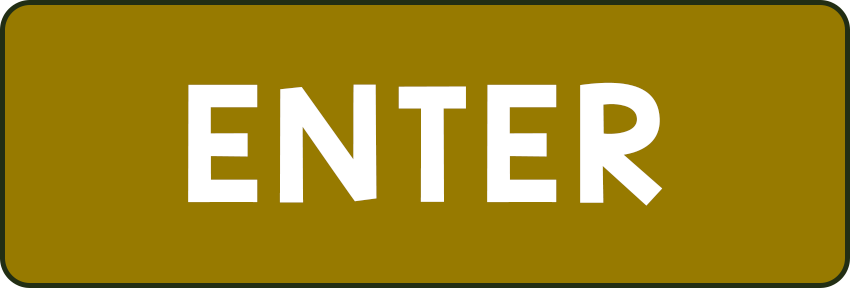
<style>
.page{position:relative;width:850px;height:288px;background:#977a00}
.page>*{position:absolute;margin:0}
.t1{font:133.3px "KGBlankSpaceSolid";letter-spacing:0.1em;color:#ffffff}
</style>
<div class="page">
<p class="t1" style="left:188px;top:82px;width:475px;height:124px">ENTER</p>
</div>
